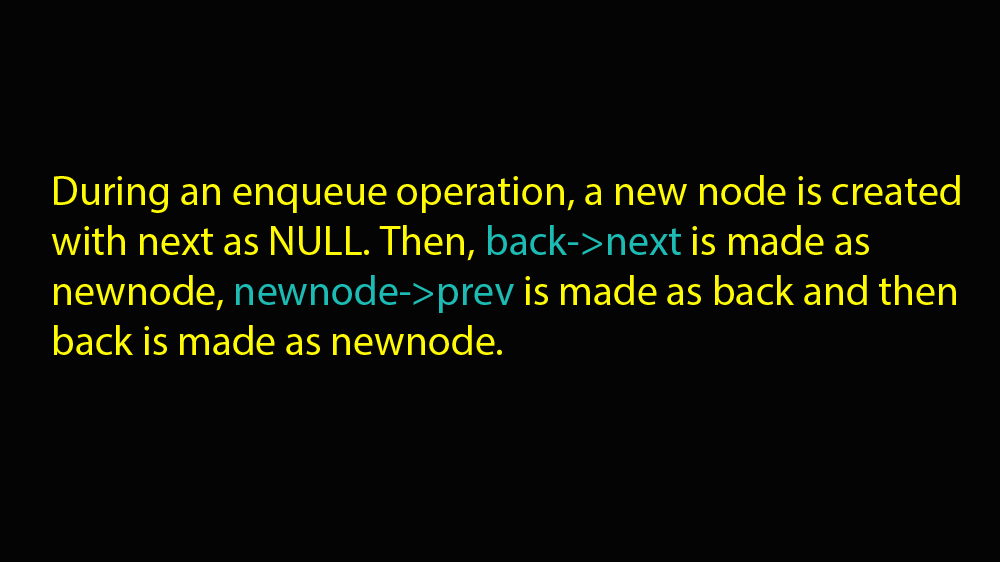
<style>
.page{position:relative;width:1000px;height:562px;background:#050404}
.page>*{position:absolute;margin:0}
.t1{font:41.7px "MyriadPro-Regular";color:#fefb04}
.t2{font:29.2px "MyriadPro-Regular";color:#ffffff}
.t3{font:41.7px "MyriadPro-Regular";color:#1cbbb4}
</style>
<div class="page">
<p class="t1" style="left:51px;top:175px;width:909px;height:180px"><span class="t2"><br><br><br></span>During an enqueue operation, a new node is created with next as NULL. Then, <span class="t3">back-&gt;next</span> is made as newnode, <span class="t3">newnode-&gt;prev</span> is made as back and then back is made as newnode.</p>
</div>
